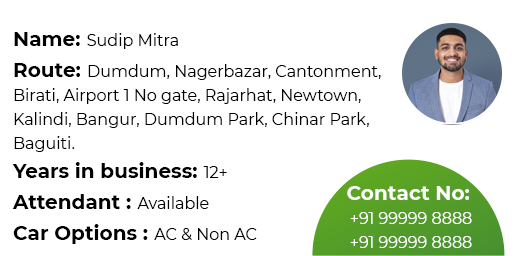
<style>
.page{position:relative;width:516px;height:256px;background:#ffffff}
.page>*{position:absolute;margin:0}
.t1{font:16px "Montserrat-Regular";color:#000000}
.t2{font:20px "Montserrat-Bold";color:#000000}
.t3{font:16px/24px "Montserrat-Regular";color:#000000}
.t4{font:20px/24px "Montserrat-Bold";color:#000000}
.t5{font:16px/24px "Montserrat-Regular";color:#ffffff}
.t6{font:20px/24px "Montserrat-Bold";color:#ffffff}
</style>
<div class="page">
<p class="t1" style="left:14px;top:32px;width:164px;height:17px"><span class="t2">Name: </span>Sudip Mitra</p>
<p class="t3" style="left:14px;top:63px;width:367px;height:89px"><span class="t4">Route: </span>Dumdum, Nagerbazar, Cantonment,<br>Birati, Airport 1 No gate, Rajarhat, Newtown,<br>Kalindi, Bangur, Dumdum Park, Chinar Park,<br>Baguiti.</p>
<p class="t2" style="left:12px;top:162px;width:215px;height:16px">Years in business: <span class="t1">12+</span></p>
<p class="t2" style="left:12px;top:194px;width:197px;height:15px">Attendant : <span class="t1">Available</span></p>
<p class="t5" style="left:347px;top:186px;width:125px;height:62px;text-align:center"><span class="t6">Contact No: <br></span>+91 99999 8888<br>+91 99999 8888</p>
<p class="t2" style="left:13px;top:224px;width:244px;height:20px">Car Options : <span class="t1">AC &amp; Non AC</span></p>
</div>
